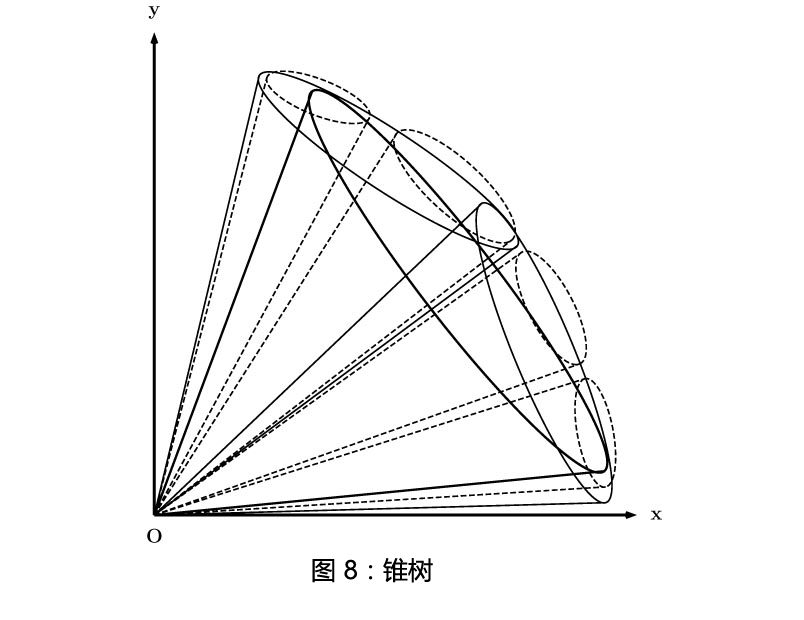
<style>
.page{position:relative;width:804px;height:620px;background:#ffffff}
.page>*{position:absolute;margin:0}
.t1{font:25px "MicrosoftYaHei";color:#000000}
</style>
<div class="page">
<p class="t1" style="left:312px;top:558px;width:121px;height:25px">图 8：锥树</p>
</div>
